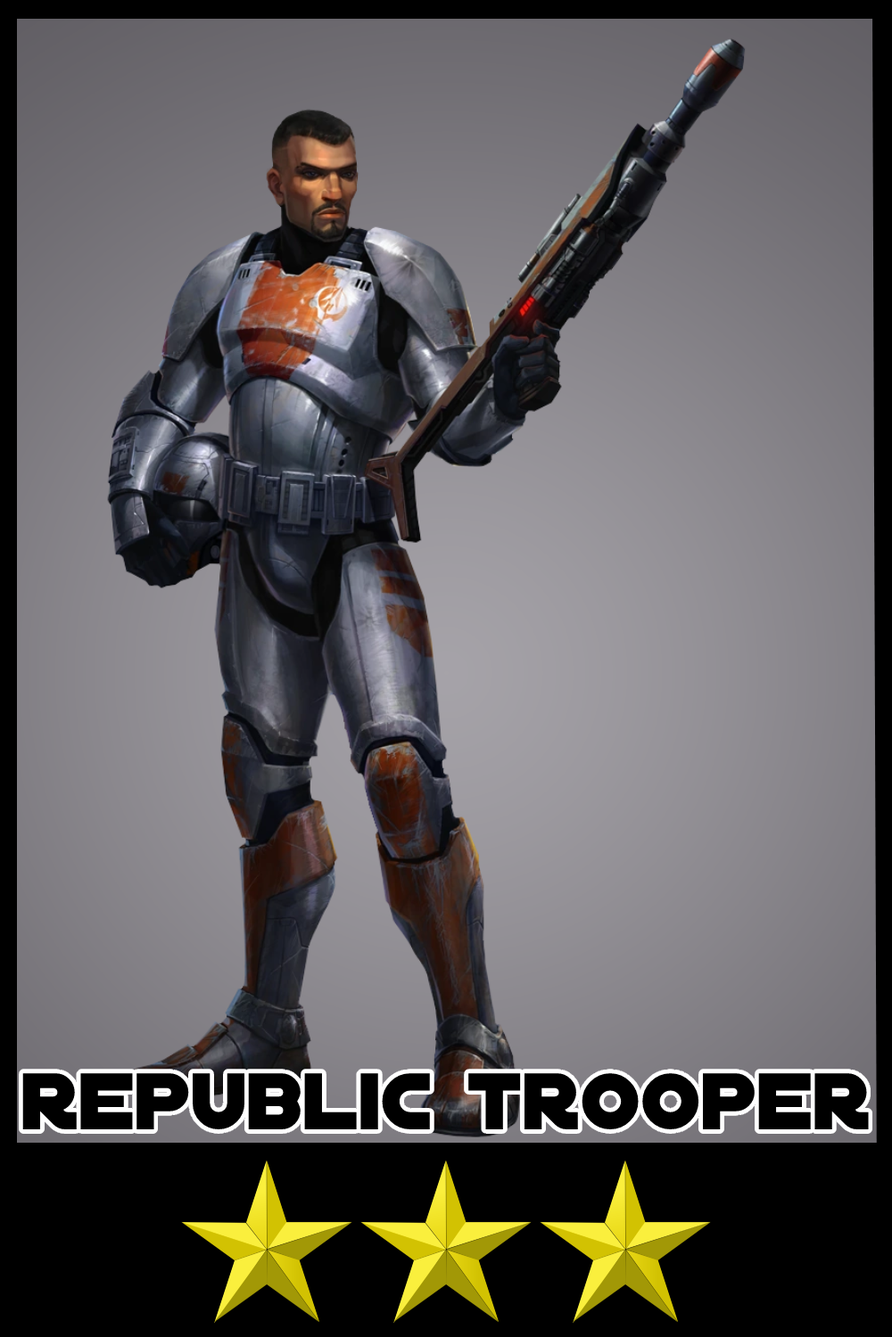
<style>
.page{position:relative;width:892px;height:1337px}
.page>*{position:absolute;margin:0}
.t1{font:86.1px "DistantGalaxy";color:#000000}
</style>
<div class="page">
<p class="t1" style="left:22px;top:1073px;width:846px;height:57px">republic trooper</p>
</div>
